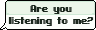
<style>
.page{position:relative;width:96px;height:30px;background:#fcfffb}
.page>*{position:absolute;margin:0}
.t1{font:10px "SFPixelate-Bold";color:#1b281e;scale:0.88 1}
</style>
<div class="page">
<p class="t1" style="left:8px;top:5px;width:85px;height:21px;text-align:center">Are you <br>listening to me?</p>
<p class="t1" style="left:9px;top:5px;width:85px;height:21px;text-align:center">Are you <br>listening to me?</p>
</div>
